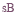
<style>
.page{position:relative;width:15px;height:15px;background:#ffffff}
.page>*{position:absolute;margin:0}
.t1{font:12px "TimesNewRomanPSMT";letter-spacing:-0.01em;color:#7b506f}
</style>
<div class="page">
<p class="t1" style="left:2px;top:3px;width:12px;height:9px">sB</p>
</div>
